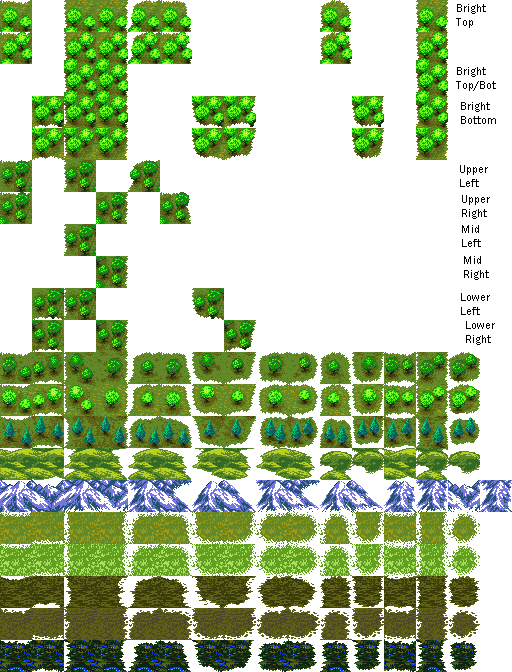
<style>
.page{position:relative;width:512px;height:672px;background:#ffffff}
.page>*{position:absolute;margin:0}
.t1{font:12px "FranklinGothic-Book";color:#000000}
</style>
<div class="page">
<p class="t1" style="left:456px;top:4px;width:30px;height:24px">Bright <br>Top</p>
<p class="t1" style="left:456px;top:67px;width:40px;height:24px">Bright<br>Top/Bot</p>
<p class="t1" style="left:461px;top:102px;width:35px;height:22px">Bright<br>Bottom</p>
<p class="t1" style="left:460px;top:165px;width:28px;height:22px">Upper<br>Left</p>
<p class="t1" style="left:462px;top:195px;width:28px;height:24px">Upper<br>Right</p>
<p class="t1" style="left:462px;top:225px;width:19px;height:22px">Mid<br>Left</p>
<p class="t1" style="left:464px;top:256px;width:25px;height:24px">Mid<br>Right</p>
<p class="t1" style="left:461px;top:293px;width:29px;height:22px">Lower<br>Left</p>
<p class="t1" style="left:466px;top:321px;width:29px;height:24px">Lower<br>Right</p>
</div>
